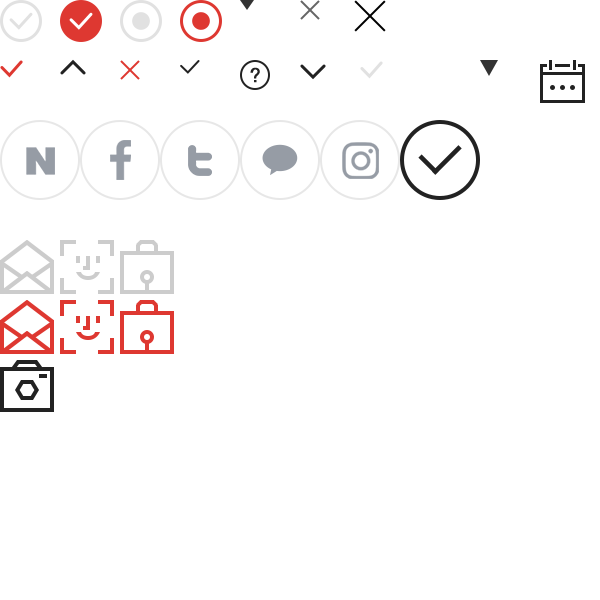
<style>
.page{position:relative;width:600px;height:600px;background:#ffffff}
.page>*{position:absolute;margin:0}
.t1{font:20px "Helvetica";letter-spacing:-0.05em;color:#222222;font-weight:bold}
</style>
<div class="page">
<p class="t1" style="left:250px;top:67px;width:10px;height:16px">?</p>
</div>
